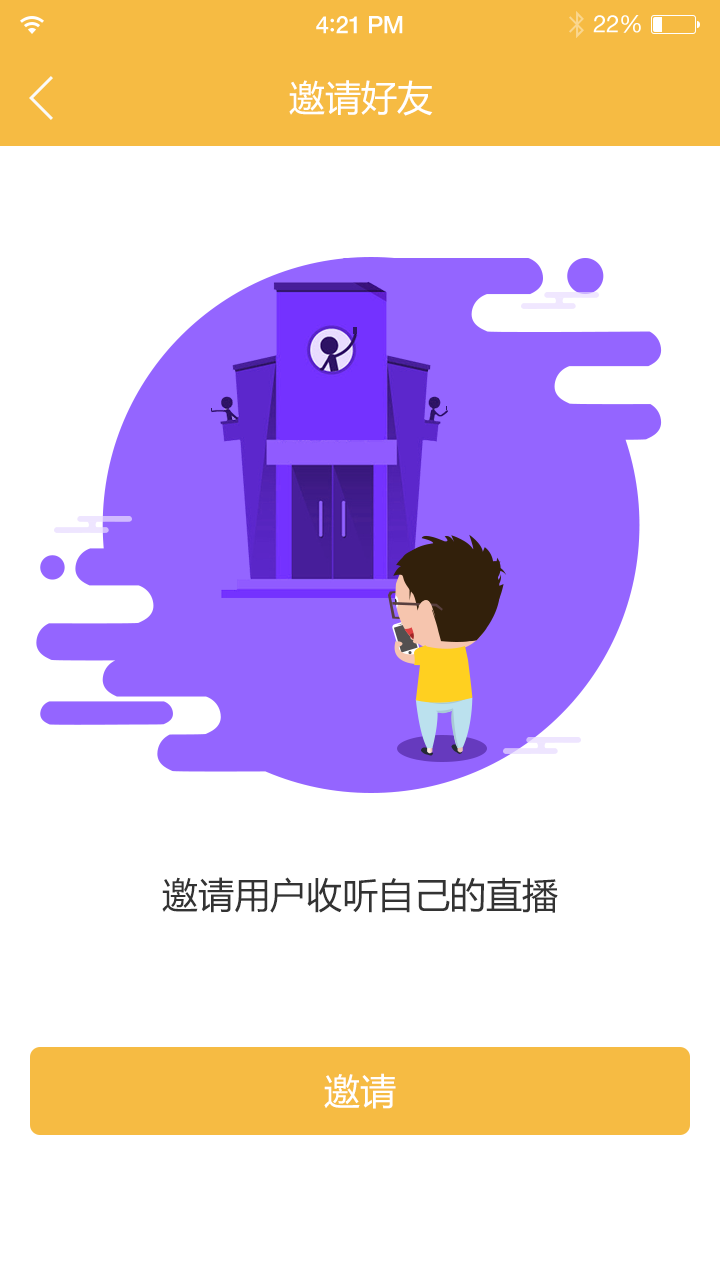
<style>
.page{position:relative;width:720px;height:1280px;background:#ffffff}
.page>*{position:absolute;margin:0}
.t1{font:36px "MicrosoftYaHei";color:#ffffff}
.t2{font:36px "MicrosoftYaHei";color:#333333}
</style>
<div class="page">
<p class="t1" style="left:289px;top:80px;width:144px;height:36px">邀请好友</p>
<p class="t2" style="left:162px;top:877px;width:396px;height:36px">邀请用户收听自己的直播</p>
<p class="t1" style="left:324px;top:1073px;width:72px;height:36px">邀请</p>
</div>
